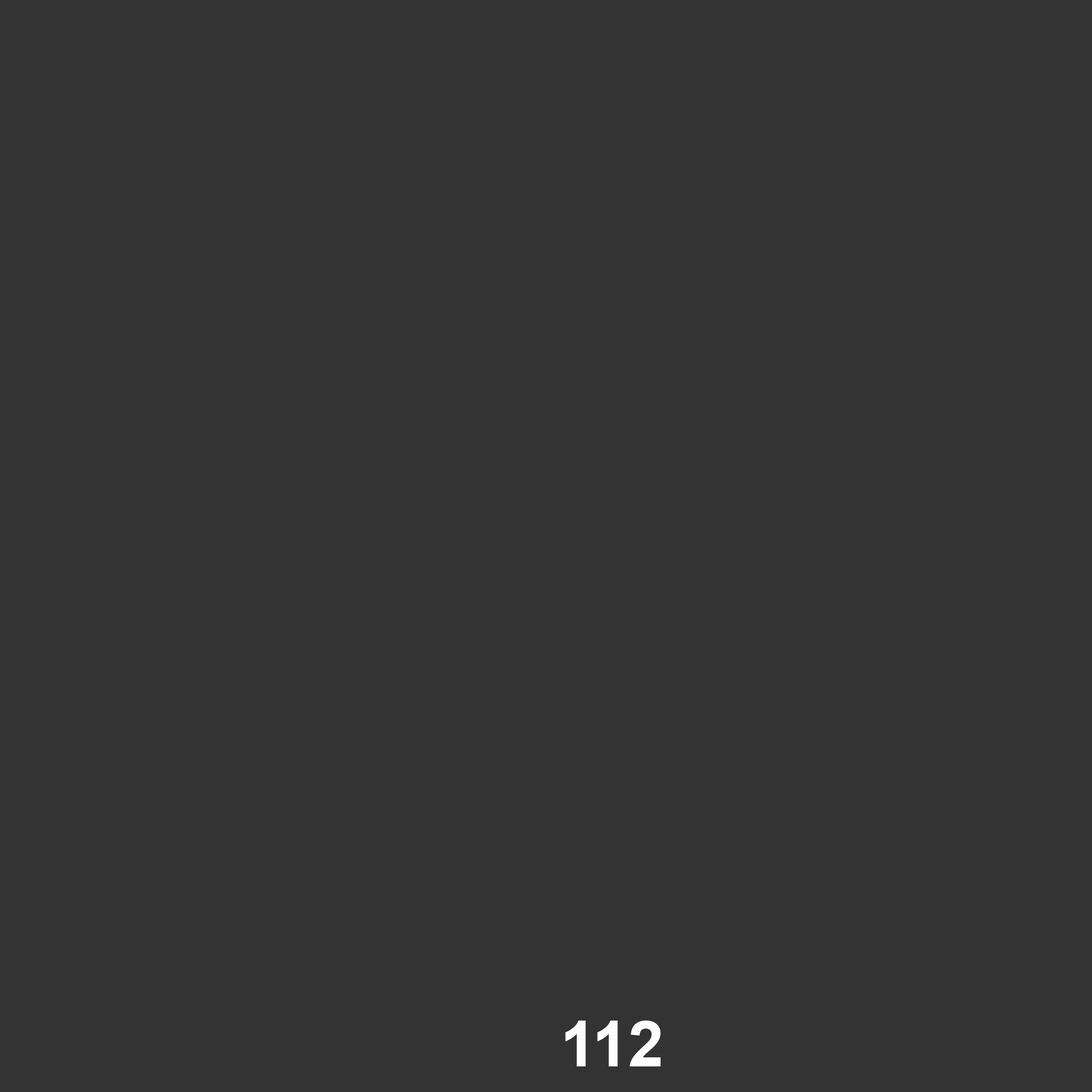
<style>
.page{position:relative;width:1092px;height:1092px;background:#333333}
.page>*{position:absolute;margin:0}
.t1{font:64px "Arial-BoldMT";color:#ffffff}
</style>
<div class="page">
<p class="t1" style="left:565px;top:1021px;width:96px;height:45px">112</p>
</div>
